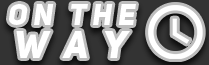
<style>
.page{position:relative;width:209px;height:65px;background:#bdbdbd}
.page>*{position:absolute;margin:0}
.t1{font:29.2px "UniSansHeavyItalicCAPS";letter-spacing:0.2em;color:#ffffff}
.t2{font:37.5px "UniSansHeavyItalicCAPS";letter-spacing:0.48em;color:#ffffff}
.t3{font:33.3px "UniSansHeavyItalicCAPS";letter-spacing:0.2em;color:#ffffff}
</style>
<div class="page">
<p class="t1" style="left:9px;top:4px;width:127px;height:21px">on the</p>
<p class="t2" style="left:16px;top:31px;width:114px;height:27px"><span class="t3"> </span>way</p>
</div>
